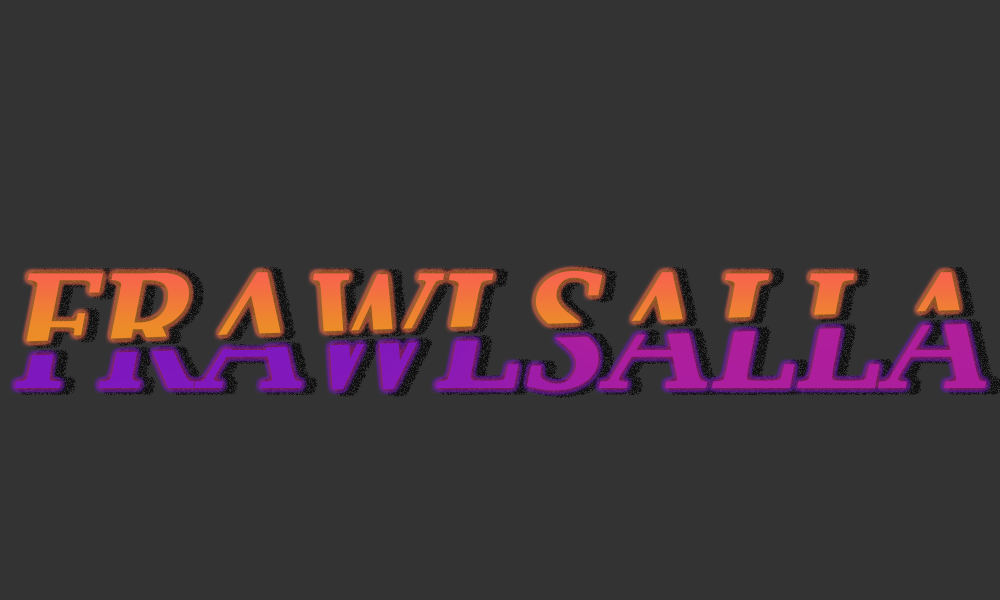
<style>
.page{position:relative;width:1000px;height:600px;background:#333333}
.page>*{position:absolute;margin:0}
.t1{font:140.5px "LucidaBright-DemiItalic"}
</style>
<div class="page">
<p class="t1" style="left:8px;top:270px;width:973px;height:108px">FRAWLSALLA</p>
<p class="t1" style="left:14px;top:283px;width:973px;height:108px">FRAWLSALLA</p>
</div>
